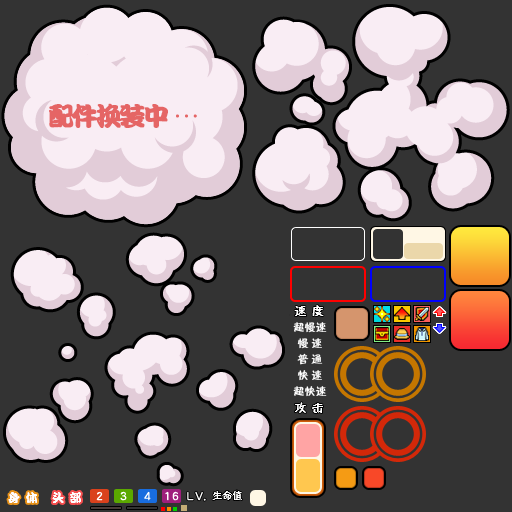
<style>
.page{position:relative;width:512px;height:512px;background:#333333}
.page>*{position:absolute;margin:0}
.t1{font:26px "DFPKanTingLiuW9";letter-spacing:-0.12em;color:#e56565;font-weight:bold}
.t2{font:12px "FZZBHJW--GB1-0";letter-spacing:0.1em;color:#ffffff}
.t3{font:11px "FZZBHJW--GB1-0";color:#ffffff}
.t4{font:12px "DFPKanTingLiuW9";letter-spacing:0.075em;color:#ffffff}
.t5{font:10px "FZZBHJW--GB1-0";color:#ffffff}
</style>
<div class="page">
<p class="t1" style="left:49px;top:103px;width:119px;height:25px">配件换装中</p>
<p class="t2" style="left:294px;top:305px;width:30px;height:11px">速 度</p>
<p class="t3" style="left:293px;top:322px;width:34px;height:11px">超慢速</p>
<p class="t3" style="left:297px;top:338px;width:25px;height:11px">慢 速</p>
<p class="t3" style="left:297px;top:353px;width:26px;height:12px">普 通</p>
<p class="t3" style="left:297px;top:370px;width:25px;height:11px">快 速</p>
<p class="t3" style="left:293px;top:386px;width:34px;height:11px">超快速</p>
<p class="t2" style="left:295px;top:402px;width:28px;height:11px">攻 击</p>
<p class="t4" style="left:8px;top:492px;width:29px;height:11px">身 体</p>
<p class="t4" style="left:52px;top:492px;width:29px;height:11px">头 部</p>
<p class="t5" style="left:212px;top:491px;width:30px;height:9px">生命值</p>
</div>
